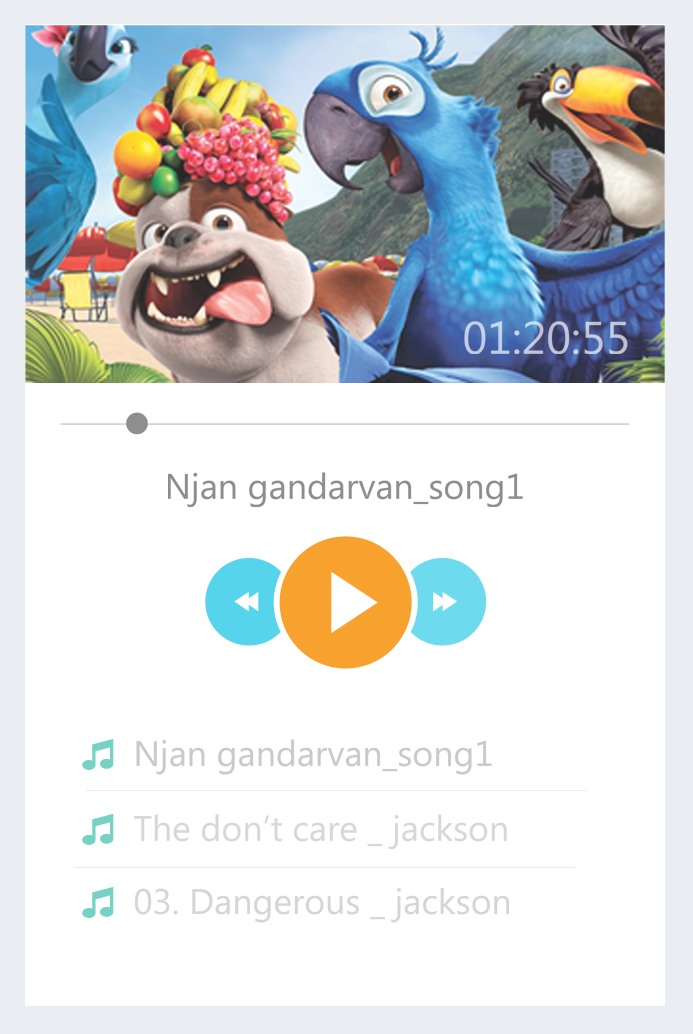
<style>
.page{position:relative;width:693px;height:1034px;background:#ffffff}
.page>*{position:absolute;margin:0}
.t1{font:45.7px "SegoeWPN";color:#c3cadf;text-transform:uppercase}
.t2{font:35.6px "SegoeWPN";color:#8d8d8d}
.t3{font:35.6px "SegoeWPN";color:#c9c9c9}
.t4{font:35.6px "SegoeWPN";color:#d8d7d7}
.t5{font:35.6px "SegoeWPN";color:#d6d5d5}
</style>
<div class="page">
<p class="t1" style="left:464px;top:321px;width:164px;height:33px">01:20:55</p>
<p class="t2" style="left:168px;top:472px;width:355px;height:35px">Njan gandarvan_song1</p>
<p class="t3" style="left:136px;top:739px;width:356px;height:36px">Njan gandarvan_song1</p>
<p class="t4" style="left:134px;top:814px;width:373px;height:35px">The don’t care _ jackson</p>
<p class="t5" style="left:135px;top:888px;width:374px;height:35px">03. Dangerous _ jackson</p>
</div>
